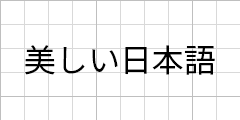
<style>
.page{position:relative;width:240px;height:120px;background:#ffffff}
.page>*{position:absolute;margin:0}
.t1{font:32px "NotoSansCJKjp-Regular";color:#000000}
</style>
<div class="page">
<p class="t1" style="left:25px;top:45px;width:190px;height:30px">美しい日本語</p>
</div>
